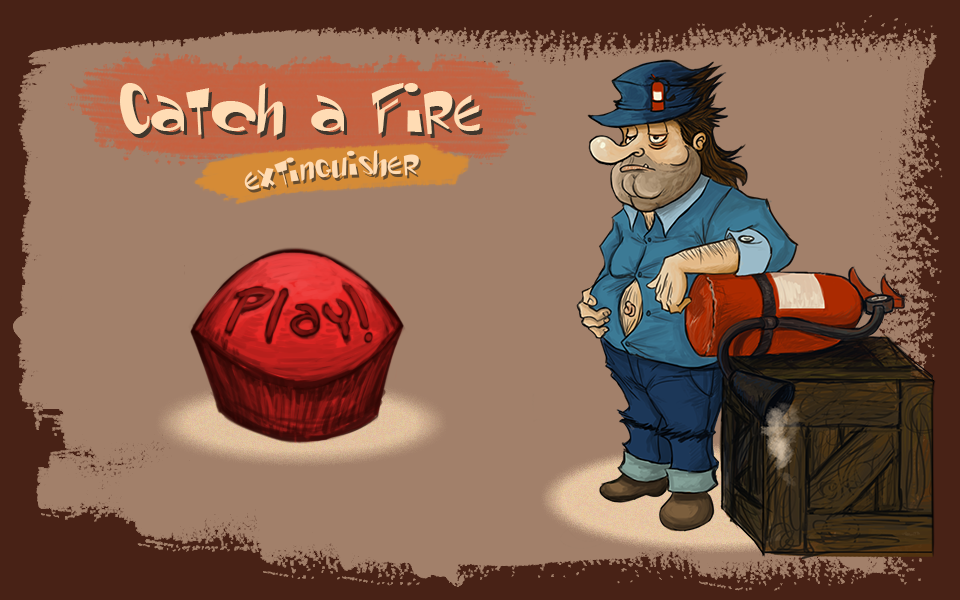
<style>
.page{position:relative;width:960px;height:600px;background:#a2806a}
.page>*{position:absolute;margin:0}
.t1{font:72px "RenStimpy";color:#ffdcb4}
.t2{font:36px "RenStimpy";color:#ffdcb4}
</style>
<div class="page">
<p class="t1" style="left:120px;top:83px;width:360px;height:53px">Catch a Fire</p>
<p class="t2" style="left:244px;top:149px;width:175px;height:41px;rotate:-5deg">extinguisher</p>
</div>
